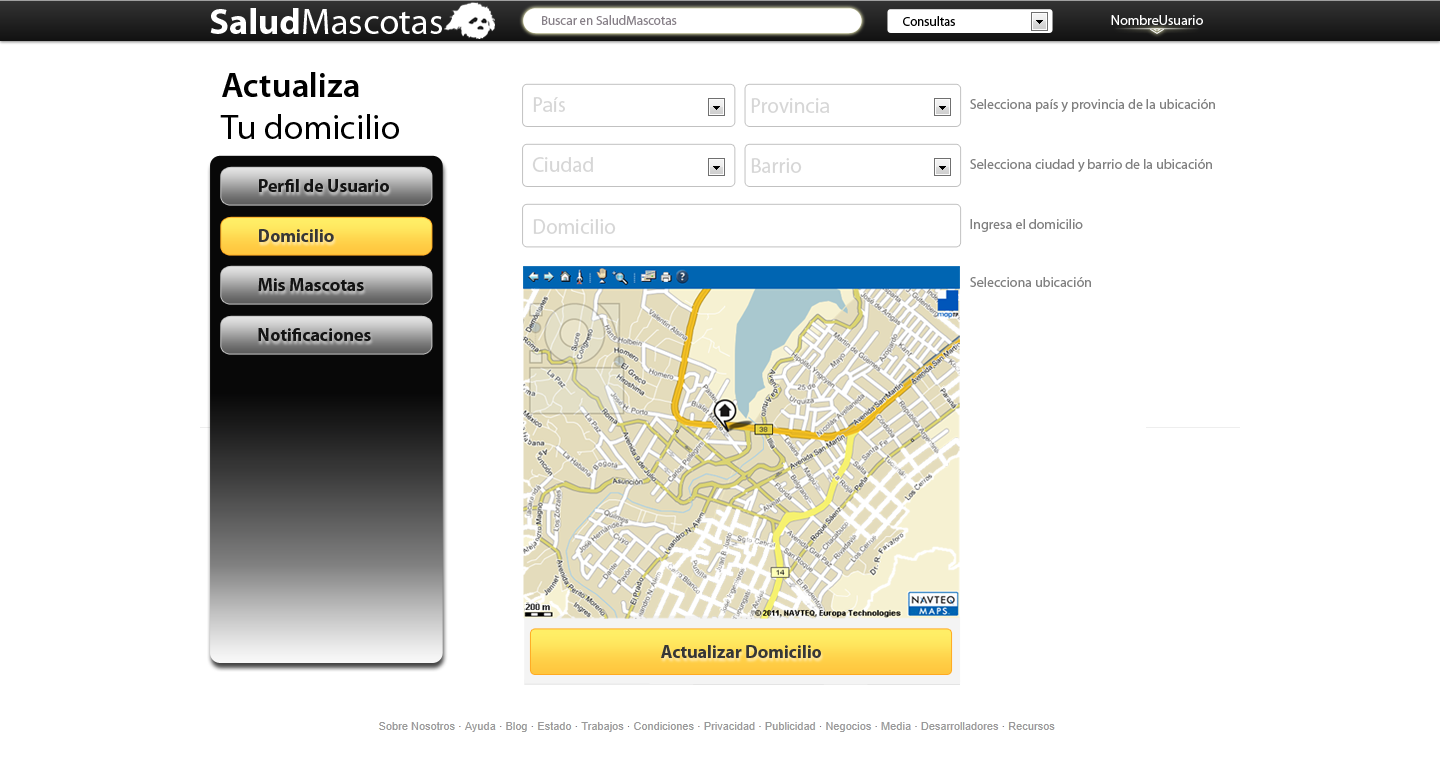
<style>
.page{position:relative;width:1440px;height:770px;background:#ffffff}
.page>*{position:absolute;margin:0}
.t1{font:36.6px "MyriadPro-Regular";color:#ffffff}
.t2{font:36.6px "MyriadPro-Bold";color:#ffffff}
.t3{font:13px "MyriadPro-Regular";color:#878088}
.t4{font:13px "MyriadPro-Regular";color:#000000}
.t5{font:14px "MyriadPro-Semibold"}
.t6{font:14px "MyriadPro-Regular";color:#ffffff}
.t7{font:35px "MyriadPro-Regular";color:#000000}
.t8{font:35px "MyriadPro-Semibold";color:#000000}
.t9{font:21px "MyriadPro-Regular";color:#d6d6d6}
.t10{font:14px "MyriadPro-Regular";color:#808080}
.t11{font:18px "MyriadPro-Bold";color:#141414}
.t12{font:18px "MyriadPro-Bold";color:#373737}
</style>
<div class="page">
<p class="t1" style="left:210px;top:8px;width:232px;height:26px"><span class="t2">Salud</span>Mascotas</p>
<p class="t3" style="left:542px;top:15px;width:135px;height:10px">Buscar en SaludMascotas</p>
<p class="t4" style="left:903px;top:16px;width:52px;height:10px">Consultas</p>
<p class="t5" style="left:1110px;top:15px;width:95px;height:10px">NombreUsuario</p>
<p class="t6" style="left:1111px;top:15px;width:92px;height:10px">NombreUsuario</p>
<p class="t7" style="left:220px;top:72px;width:179px;height:67px"><span class="t8">Actualiza<br></span>Tu domicilio</p>
<p class="t9" style="left:533px;top:97px;width:32px;height:15px">País</p>
<p class="t9" style="left:751px;top:98px;width:79px;height:15px">Provincia</p>
<p class="t10" style="left:970px;top:99px;width:245px;height:13px">Selecciona país y provincia de la ubicación</p>
<p class="t9" style="left:532px;top:157px;width:61px;height:15px">Ciudad</p>
<p class="t9" style="left:751px;top:158px;width:51px;height:15px">Barrio</p>
<p class="t10" style="left:970px;top:159px;width:242px;height:13px">Selecciona ciudad y barrio de la ubicación</p>
<p class="t11" style="left:259px;top:179px;width:130px;height:13px">Perfil de Usuario</p>
<p class="t9" style="left:533px;top:219px;width:83px;height:15px">Domicilio</p>
<p class="t10" style="left:970px;top:219px;width:113px;height:13px">Ingresa el domicilio</p>
<p class="t12" style="left:259px;top:229px;width:75px;height:13px">Domicilio</p>
<p class="t11" style="left:258px;top:278px;width:106px;height:13px">Mis Mascotas</p>
<p class="t10" style="left:970px;top:277px;width:121px;height:10px">Selecciona ubicación</p>
<p class="t11" style="left:258px;top:328px;width:113px;height:13px">Notificaciones</p>
<p class="t12" style="left:661px;top:645px;width:160px;height:13px">Actualizar Domicilio</p>
</div>
